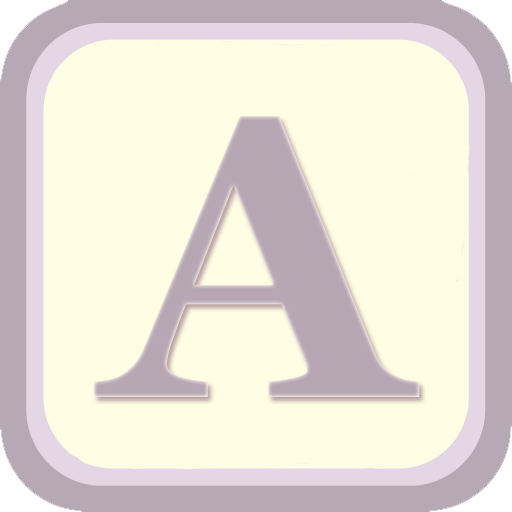
<style>
.page{position:relative;width:512px;height:512px;background:#fffde3}
.page>*{position:absolute;margin:0}
.t1{font:400px "Georgia-Bold";color:#b7a7b5}
</style>
<div class="page">
<p class="t1" style="left:93px;top:116px;width:327px;height:281px">A</p>
</div>
